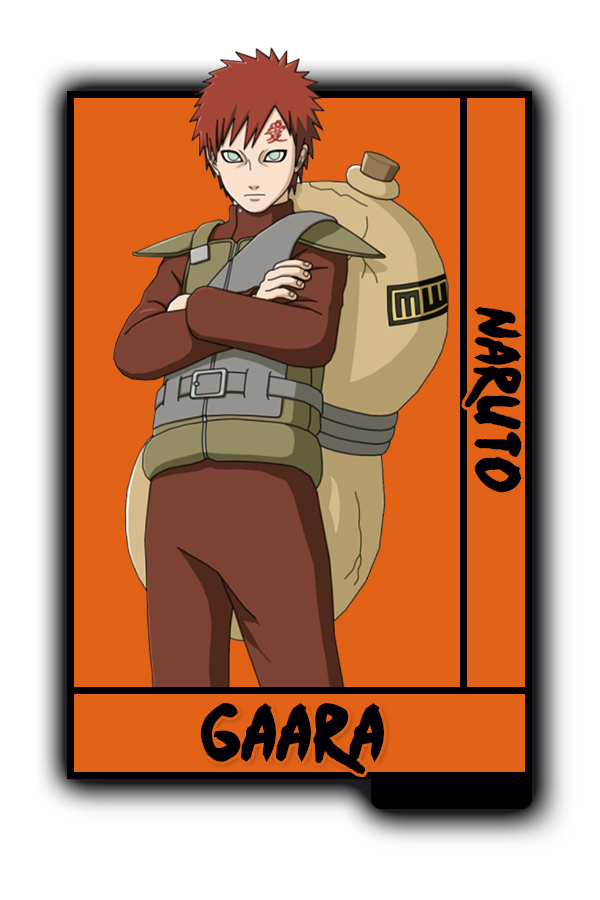
<style>
.page{position:relative;width:600px;height:900px;background:#e26317}
.page>*{position:absolute;margin:0}
.t1{font:52px "Ninja-Naruto";color:#010005}
.t2{font:65.2px "Ninja-Naruto";color:#010005}
</style>
<div class="page">
<p class="t1" style="left:464px;top:307px;width:59px;height:186px;rotate:90deg">Naruto</p>
<p class="t2" style="left:201px;top:703px;width:183px;height:72px">Gaara</p>
</div>
